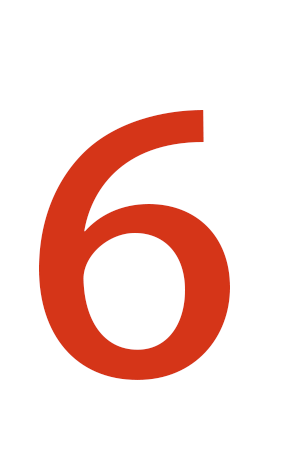
<style>
.page{position:relative;width:300px;height:450px;background:#ffffff}
.page>*{position:absolute;margin:0}
.t1{font:348.7px "AdobeFanHeitiStd-Bold";color:#d53518;scale:1.11 1}
</style>
<div class="page">
<p class="t1" style="left:39px;top:110px;width:191px;height:270px">6</p>
</div>
